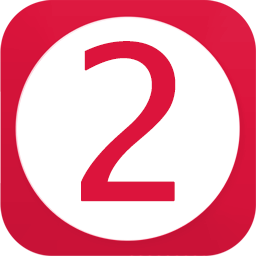
<style>
.page{position:relative;width:256px;height:256px;background:#ffffff}
.page>*{position:absolute;margin:0}
.t1{font:214px "LucidaGrande";color:#dc143c;font-weight:bold}
</style>
<div class="page">
<p class="t1" style="left:81px;top:41px;width:95px;height:161px">2</p>
</div>
